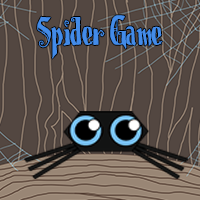
<style>
.page{position:relative;width:200px;height:200px;background:#534741}
.page>*{position:absolute;margin:0}
.t1{font:48px "ChristmasOnCrack";letter-spacing:-0.01em;color:#438be8}
</style>
<div class="page">
<p class="t1" style="left:37px;top:15px;width:126px;height:44px">Spider Game</p>
</div>
